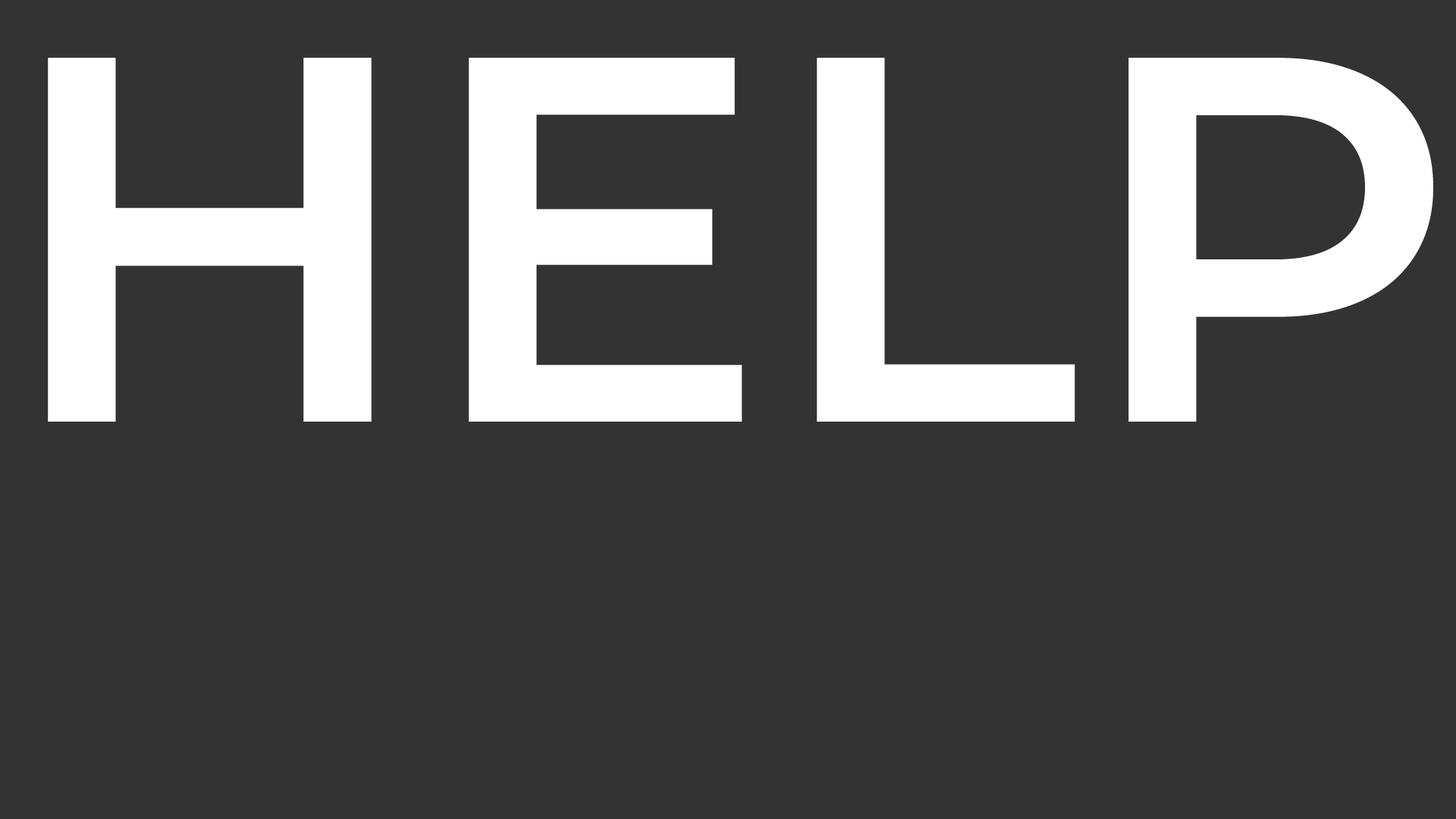
<style>
.page{position:relative;width:1456px;height:819px;background:#333333}
.page>*{position:absolute;margin:0}
.t1{font:519.5px "Montserrat-SemiBold";color:#ffffff}
</style>
<div class="page">
<p class="t1" style="left:48px;top:58px;width:1385px;height:364px">HELP</p>
</div>
